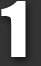
<style>
.page{position:relative;width:41px;height:66px;background:#333333}
.page>*{position:absolute;margin:0}
.t1{font:70.8px "Impact";color:#ffffff}
</style>
<div class="page">
<p class="t1" style="left:1px;top:1px;width:25px;height:56px">1</p>
</div>
